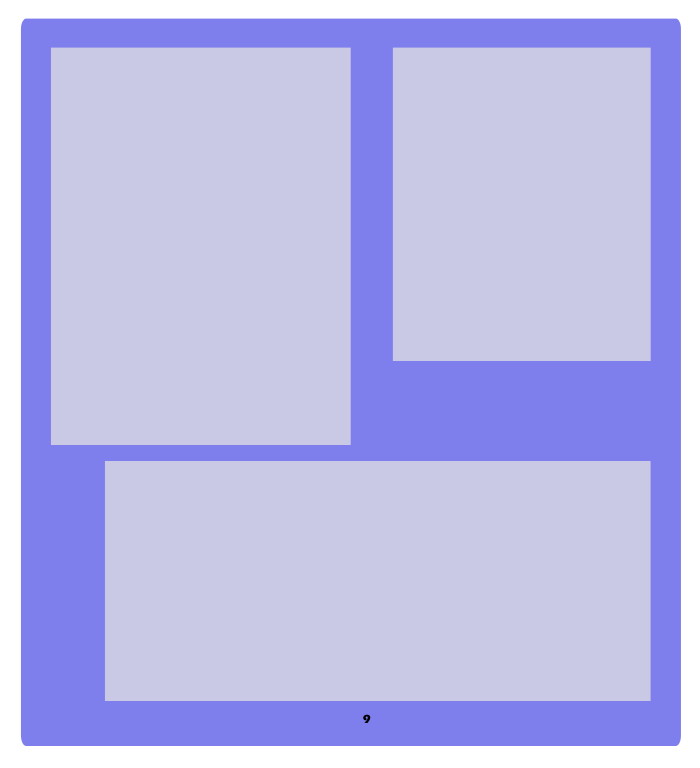
<style>
.page{position:relative;width:700px;height:768px;background:#c9c9e6}
.page>*{position:absolute;margin:0}
.t1{font:12px "ErasITC-Bold";color:#000000}
</style>
<div class="page">
<p class="t1" style="left:363px;top:714px;width:8px;height:9px">9</p>
</div>
